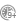
<style>
.page{position:relative;width:16px;height:25px;background:#ffffff}
.page>*{position:absolute;margin:0}
.t1{font:8px "ArialMT";color:#828282}
</style>
<div class="page">
<p class="t1" style="left:7px;top:12px;width:10px;height:6px">9+</p>
</div>
